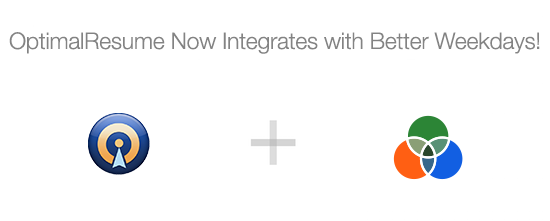
<style>
.page{position:relative;width:550px;height:221px;background:#ffffff}
.page>*{position:absolute;margin:0}
.t1{font:23px "HelveticaNeue-Light";letter-spacing:-0.01em;color:#838383}
</style>
<div class="page">
<p class="t1" style="left:9px;top:32px;width:531px;height:22px">OptimalResume Now Integrates with Better Weekdays!</p>
</div>
